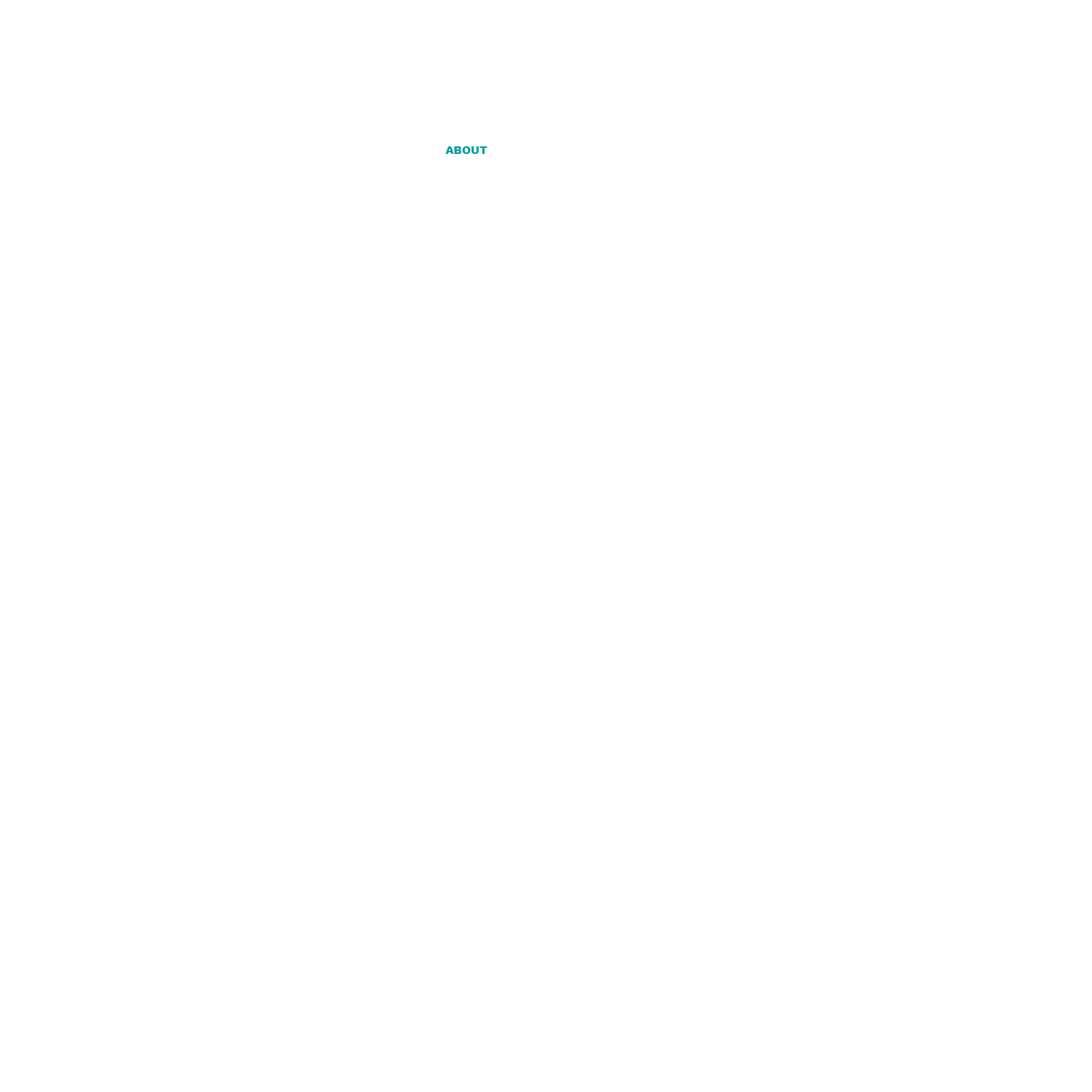
<style>
.page{position:relative;width:1092px;height:1092px;background:#ffffff}
.page>*{position:absolute;margin:0}
.t1{font:10.6px "Arial-Black";color:#0ba39c}
</style>
<div class="page">
<p class="t1" style="left:445px;top:146px;width:43px;height:8px">ABOUT</p>
</div>
